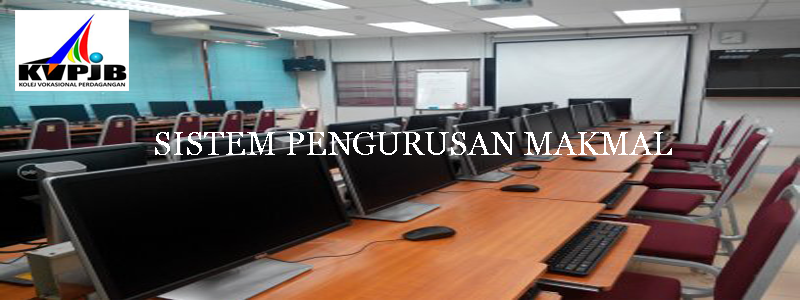
<style>
.page{position:relative;width:800px;height:300px}
.page>*{position:absolute;margin:0}
.t1{font:33.3px "Vani";color:#ffffff}
</style>
<div class="page">
<p class="t1" style="left:155px;top:132px;width:517px;height:23px">SISTEM PENGURUSAN MAKMAL</p>
</div>
